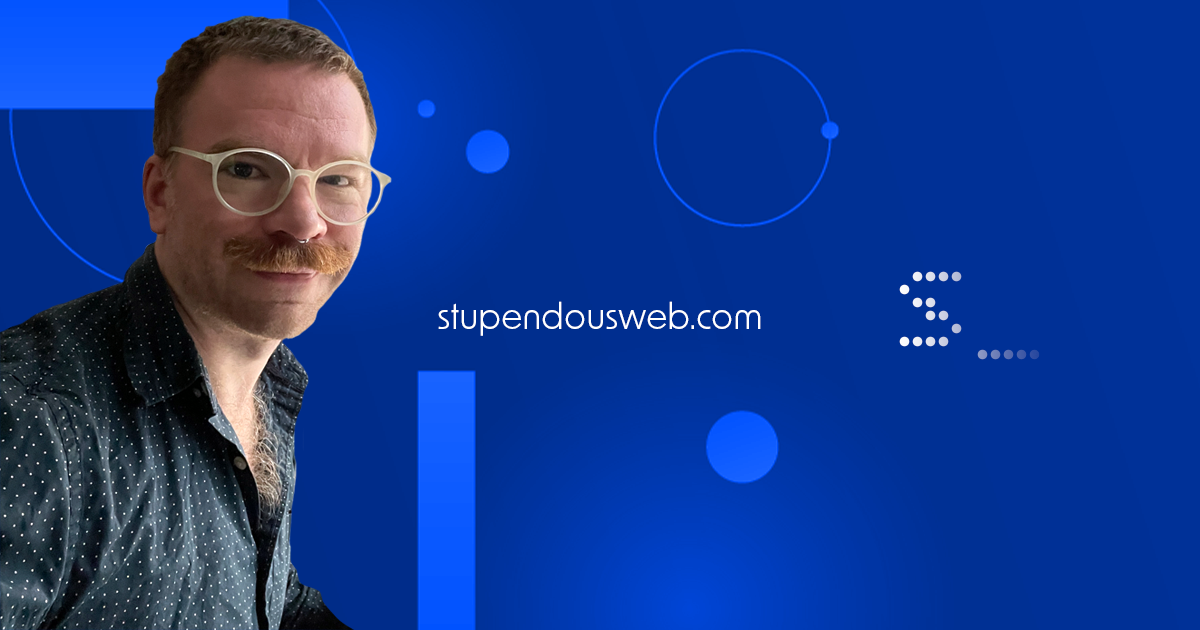
<style>
.page{position:relative;width:1200px;height:630px}
.page>*{position:absolute;margin:0}
.t1{font:130px "BitcountMonoSingle-BookCircle"}
.t2{font:36px "NewOrder-Regular";color:#ffffff}
</style>
<div class="page">
<p class="t1" style="left:899px;top:271px;width:141px;height:89px">S_</p>
<p class="t2" style="left:438px;top:301px;width:323px;height:35px">stupendousweb.com</p>
</div>
